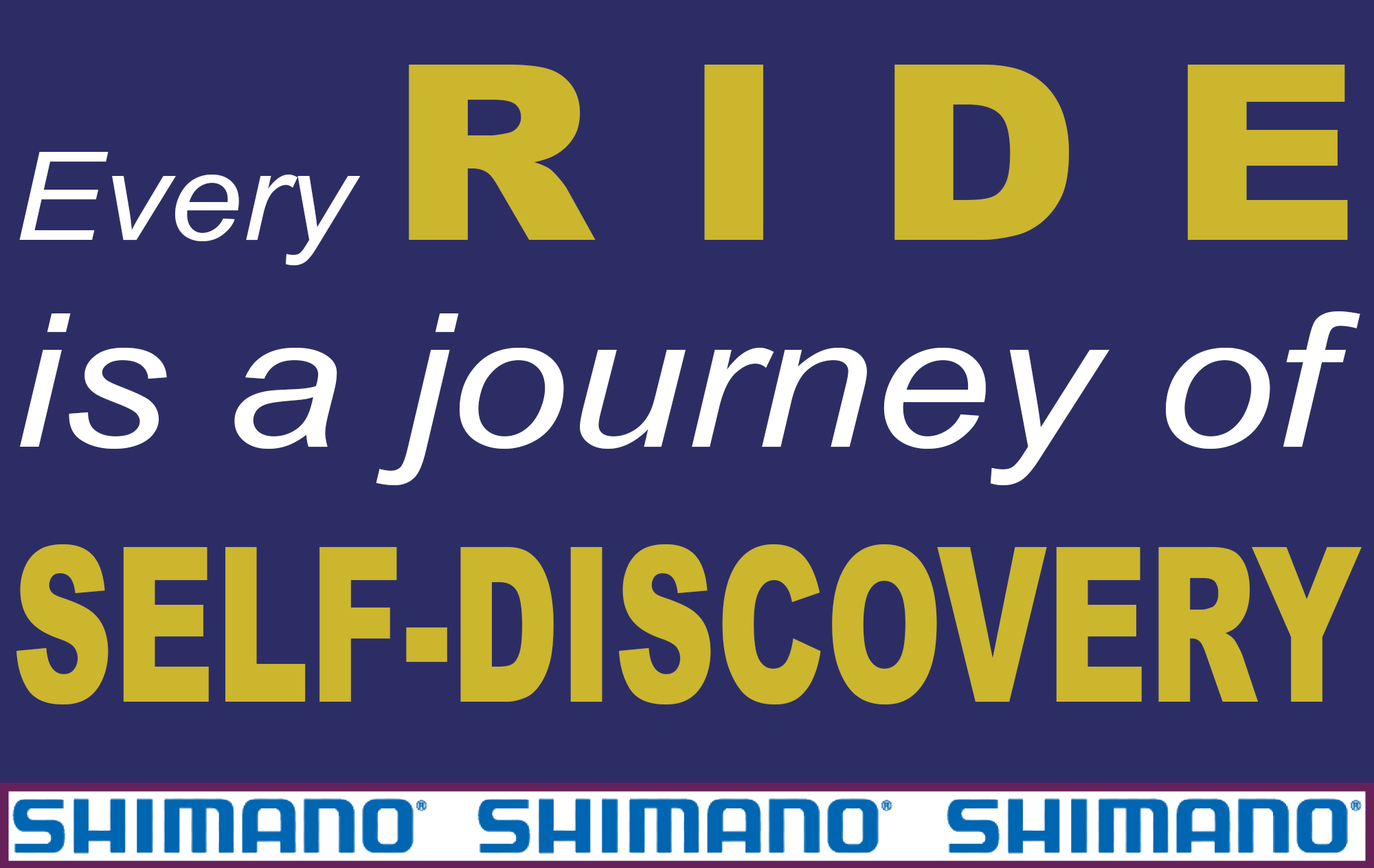
<style>
.page{position:relative;width:1374px;height:868px;background:#2d2d66}
.page>*{position:absolute;margin:0}
.t1{font:244.8px "Arial-Black";color:#cbb62d;scale:1.08 1}
.t2{font:122.4px "Arial-ItalicMT";color:#ffffff;scale:1.08 1}
.t3{font:185.3px "Arial-ItalicMT";color:#ffffff;scale:1.14 1}
.t4{font:215.9px "Arial-Black";color:#cbb62d;scale:0.65 1}
</style>
<div class="page">
<p class="t1" style="left:19px;top:65px;width:1329px;height:200px"><span class="t2">Every </span>R I D E</p>
<p class="t3" style="left:20px;top:311px;width:1340px;height:174px">is a journey of</p>
<p class="t4" style="left:16px;top:544px;width:1346px;height:160px">SELF-DISCOVERY</p>
</div>
